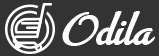
<style>
.page{position:relative;width:159px;height:56px;background:#333333}
.page>*{position:absolute;margin:0}
.t1{font:38.6px "AdvertisingScript-Bold";color:#ffffff}
</style>
<div class="page">
<p class="t1" style="left:62px;top:11px;width:93px;height:35px">Odila</p>
</div>
